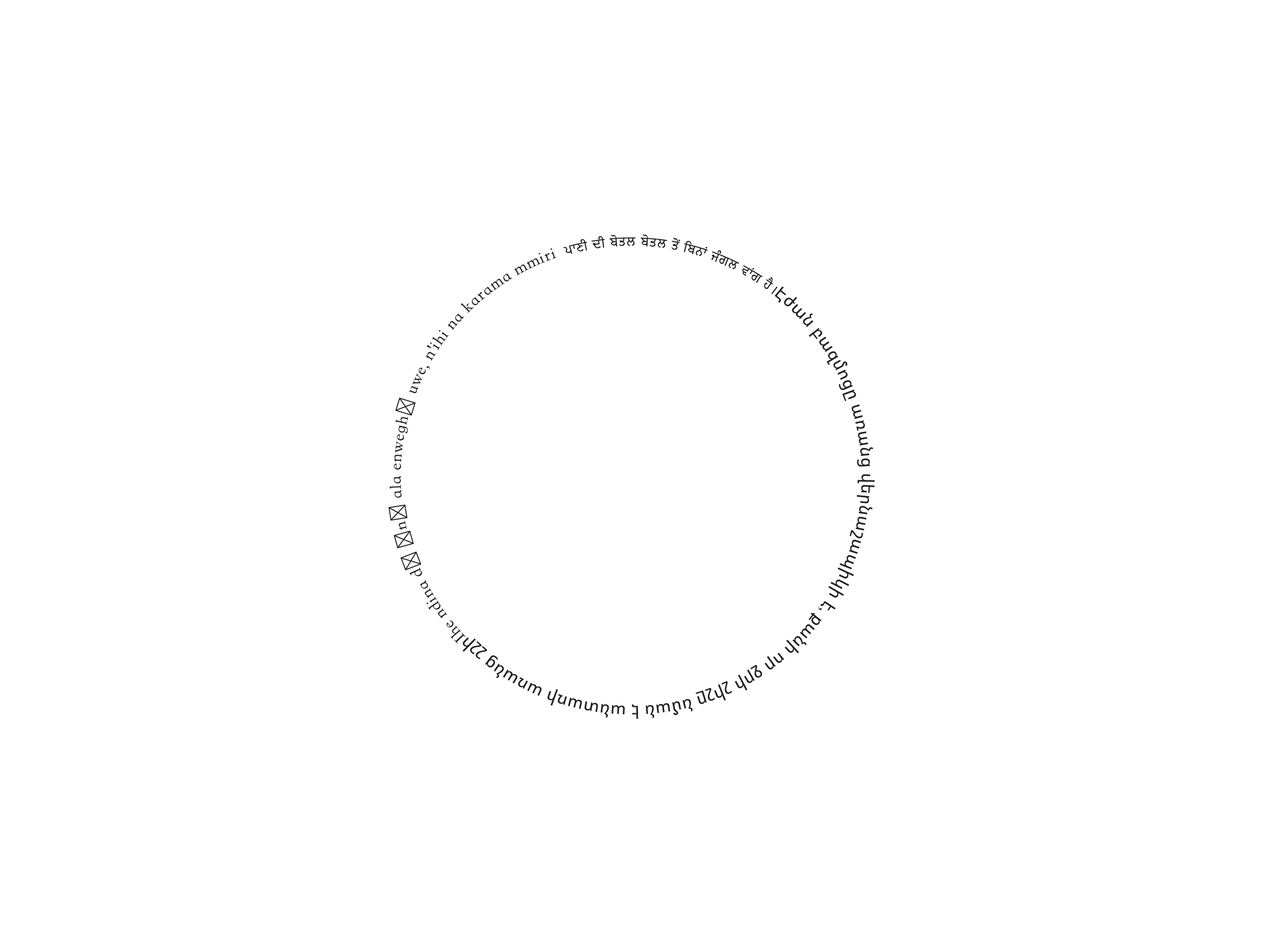
<style>
.page{position:relative;width:1261px;height:945px;background:#ffffff}
.page>*{position:absolute;margin:0}
.t1{font:16.9px "STKaitiTC-Regular";letter-spacing:0.025em;color:#222222}
.t2{font:16.9px "AdobeGurmukhi-Regular";letter-spacing:0.025em;color:#222222}
.t3{font:16.9px "AdobeDevanagari-Regular";letter-spacing:0.025em;color:#222222}
.t4{font:16.9px "NotoSansArmenian-Regular";letter-spacing:0.025em;color:#222222}
.t5{font:16.9px "AdobeHeitiStd-Regular";letter-spacing:0.025em;color:#222222}
.t6{font:16.9px "ArialUnicodeMS";letter-spacing:0.025em;color:#222222}
</style>
<div class="page">
<p class="t1" style="left:388px;top:234px;width:487px;height:485px"><span class="t2">ਪਾਣੀ ਦੀ ਬੋਤਲ ਬੋਤਲ ਤੋਂ ਬਿਨਾਂ ਜੰਗਲ ਵਾਂਗ ਹੈ</span><span class="t3">।</span><span class="t4">Էժան բազմոցը առանց վերնաշապիկի է</span>, <span class="t4">քանի որ ջրի շիշը նման է անտառի առանց շշի</span>Ihe ndina d<span class="t5">ị ọ</span>n<span class="t5">ụ</span> ala enwegh<span class="t5">ị</span> uwe, n'ihi na karama mmiri d<span class="t5">ị</span> ka <span class="t5">ọ</span>h<span class="t5">ị</span>a na-enwegh<span class="t5">ị</span> karama.Awan kawes ti nalaka a kama, ta ti botelia ti danum ket kasla kabakiran nga awan ti botelia.<span class="t6">সহজ বিচনা এখন কাপোৰবিহীন</span>, <span class="t6">কাৰণ পানীৰ বটল বটল নথকা অৰণ্যৰ দৰে</span><span class="t3">।</span>Illiq pijariakittuq annuraaqanngilaq, pillugu imiqtarvik napaaqtutitut aliguqanngilluni.Jun li ch’aat moko ch’a’aj ta maak’a’ raq’,</p>
</div>
